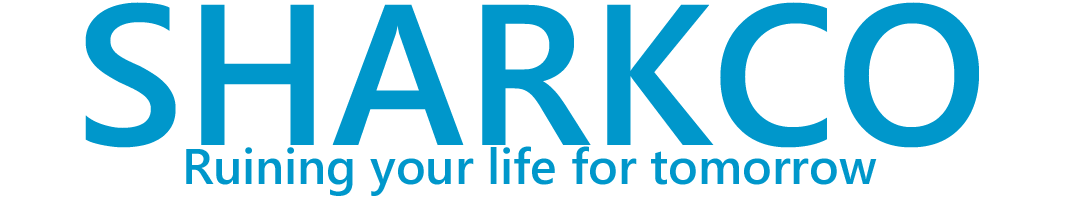
<style>
.page{position:relative;width:1080px;height:200px;background:#ffffff}
.page>*{position:absolute;margin:0}
.t1{font:200px "SegoeUI-SemiBold";color:#0097cb}
.t2{font:50px "SegoeUI-SemiBold";color:#0097cb}
</style>
<div class="page">
<p class="t1" style="left:85px;top:2px;width:894px;height:146px">SHARKCO</p>
<p class="t2" style="left:186px;top:146px;width:691px;height:50px">Ruining your life for tomorrow</p>
</div>
